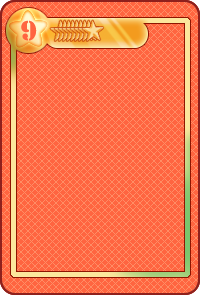
<style>
.page{position:relative;width:200px;height:295px;background:#ff6540}
.page>*{position:absolute;margin:0}
.t1{font:25px "StencilStd";color:#ff6540}
</style>
<div class="page">
<p class="t1" style="left:21px;top:20px;width:16px;height:21px">9</p>
</div>
